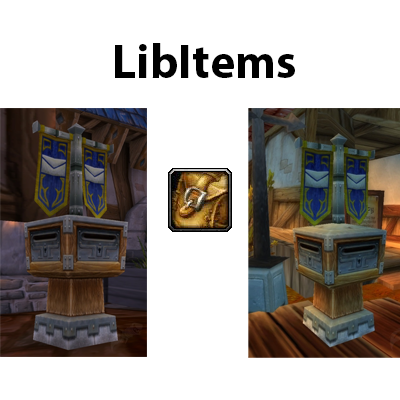
<style>
.page{position:relative;width:400px;height:400px;background:#ffffff}
.page>*{position:absolute;margin:0}
.t1{font:48px "MyriadPro-Bold";color:#000000}
</style>
<div class="page">
<p class="t1" style="left:115px;top:43px;width:180px;height:35px">LibItems</p>
</div>
